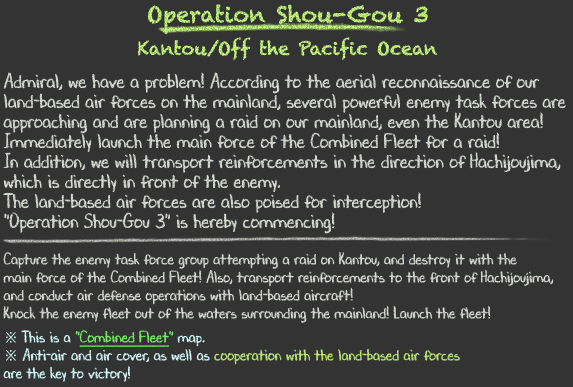
<style>
.page{position:relative;width:573px;height:387px;background:#333333}
.page>*{position:absolute;margin:0}
.t1{font:18px/36px "Chalkduster"}
.t2{font:22px/36px "Chalkduster"}
.t3{font:20px/20px "DJBChalkItUp";color:#d9ded6;scale:0.9 1}
.t4{font:16px/18px "DJBChalkItUp";color:#d9ded6;scale:0.9 1}
.t5{font:16px/24px "DJBChalkItUp";color:#d9ded6;scale:0.9 1}
.t6{font:16px/18px "TimesNewRomanPSMT";color:#d7feff;scale:0.9 1}
.t7{font:16px/18px "DJBChalkItUp";color:#d7feff;scale:0.9 1}
.t8{font:16px/18px "DJBChalkItUp";color:#7bf26b;scale:0.9 1}
.t9{font:16px/18px "DJBChalkItUp";color:#7bf26b;text-decoration:underline;scale:0.9 1}
.t10{font:16px/18px "DJBChalkItUp";color:#bdef78;scale:0.9 1}
</style>
<div class="page">
<p class="t1" style="left:137px;top:4px;width:301px;height:56px;text-align:center"><span class="t2">Operation Shou-Gou 3<br></span>Kantou/Off the Pacific Ocean</p>
<p class="t3" style="left:3px;top:72px;width:563px;height:310px">Admiral, we have a problem! According to the aerial reconnaissance of our<br>land-based air forces on the mainland, several powerful enemy task forces are<br>approaching and are planning a raid on our mainland, even the Kantou area!<br>Immediately launch the main force of the Combined Fleet for a raid!<br>In addition, we will transport reinforcements in the direction of Hachijoujima,<br>which is directly in front of the enemy.<br>The land-based air forces are also poised for interception!<br>"Operation Shou-Gou 3" is hereby commencing!<br><br><span class="t4">Capture the enemy task force group attempting a raid on Kantou, and destroy it with the<br>main force of the Combined Fleet! Also, transport reinforcements to the front of Hachijoujima,<br>and conduct air defense operations with land-based aircraft!<br></span><span class="t5">Knock the enemy fleet out of the waters surrounding the mainland! Launch the fleet!<br></span><span class="t6">※ </span><span class="t7">This is a </span><span class="t8">"</span><span class="t9">Combined Fleet</span><span class="t8">"</span><span class="t7"> map.<br></span><span class="t6">※</span><span class="t7"> Anti-air and air cover, as well as </span><span class="t10">cooperation with the land-based air forces</span><span class="t7"><br>are the key to victory!</span></p>
</div>
